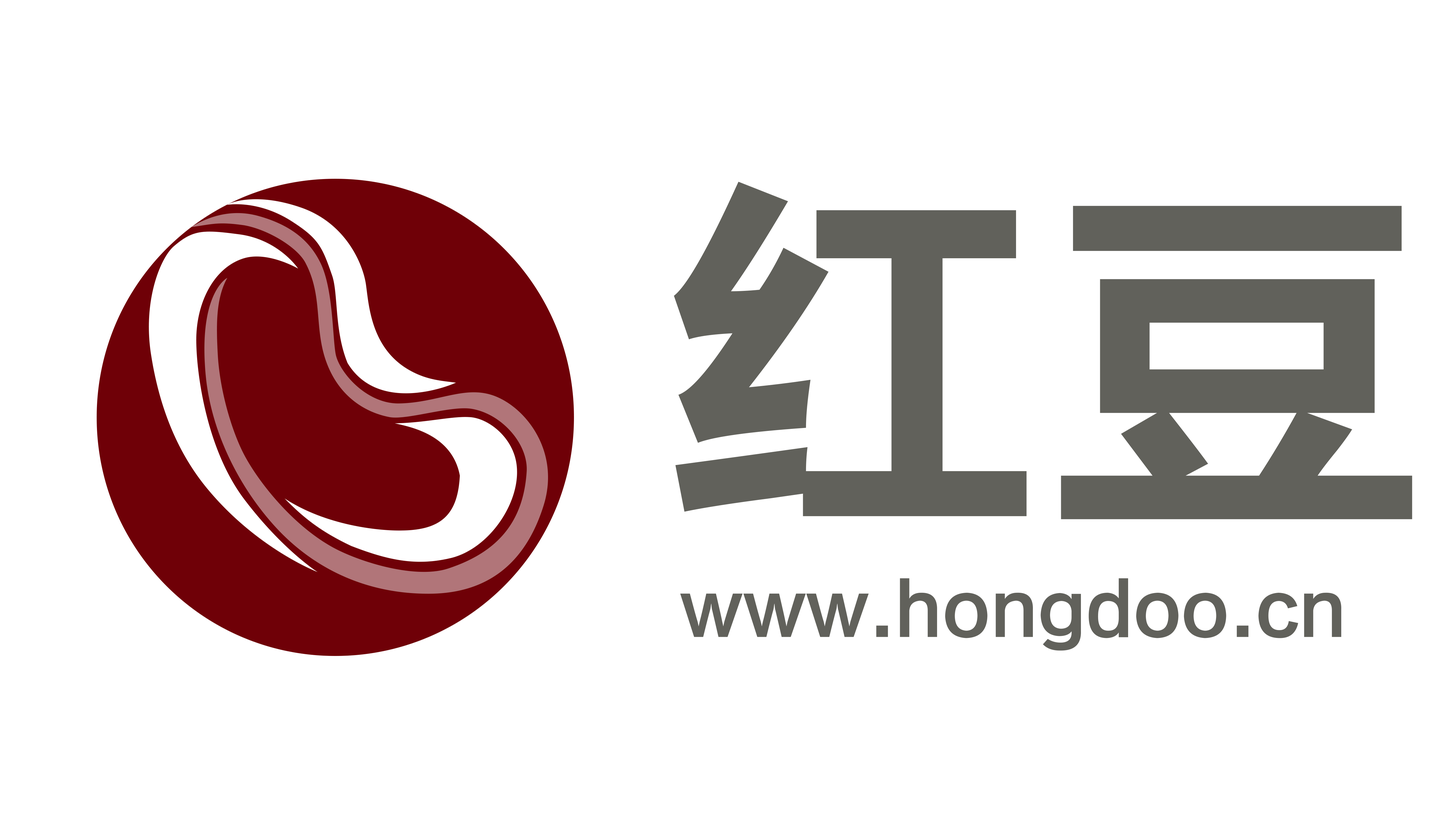
<style>
.page{position:relative;width:1456px;height:819px;background:#ffffff}
.page>*{position:absolute;margin:0}
.t1{font:384.1px "FZLTCHK--GBK1-0";color:#61615b}
.t2{font:72.6px "FZLTCHK--GBK1-0";color:#61615b}
</style>
<div class="page">
<p class="t1" style="left:674px;top:182px;width:738px;height:337px">红豆</p>
<p class="t2" style="left:680px;top:578px;width:661px;height:73px">www.hongdoo.cn</p>
</div>
